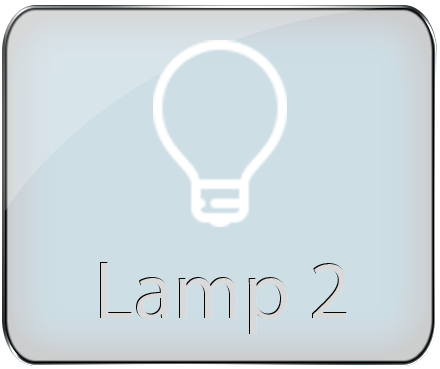
<style>
.page{position:relative;width:440px;height:369px;background:#cddee5}
.page>*{position:absolute;margin:0}
.t1{font:83.2px "MyriadPro-Regular";color:#d9d9d9}
</style>
<div class="page">
<p class="t1" style="left:100px;top:262px;width:247px;height:72px">Lamp 2</p>
</div>
